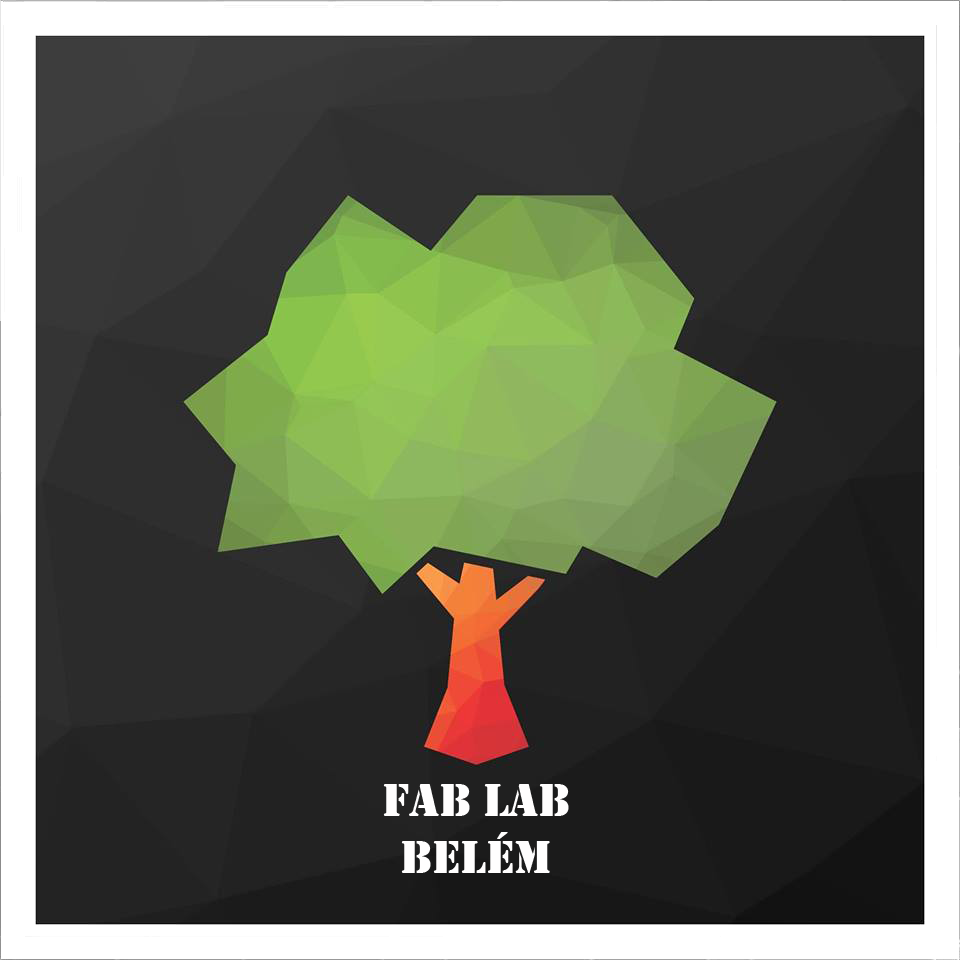
<style>
.page{position:relative;width:960px;height:960px}
.page>*{position:absolute;margin:0}
.t1{font:48px "Stencil";color:#fffefe}
</style>
<div class="page">
<p class="t1" style="left:383px;top:784px;width:186px;height:89px;text-align:center">fab lab<br>belém</p>
</div>
